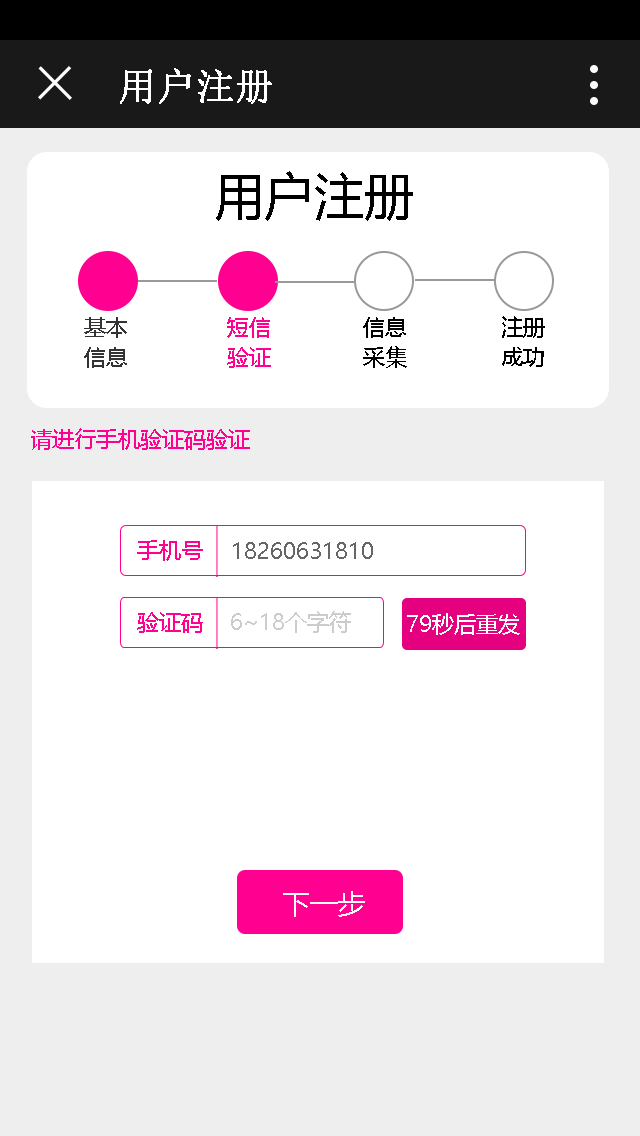
<style>
.page{position:relative;width:640px;height:1136px;background:#ffffff}
.page>*{position:absolute;margin:0}
.t1{font:38px "SimSun";color:#ffffff;font-weight:bold}
.t2{font:50px "MicrosoftYaHei";color:#000000}
.t3{font:22px/30px "MicrosoftYaHei";color:#333333}
.t4{font:22px/30px "MicrosoftYaHei";color:#ff0090}
.t5{font:22px/30px "MicrosoftYaHei";color:#030303}
.t6{font:22px/30px "MicrosoftYaHei";color:#000000}
.t7{font:22px "MicrosoftYaHei";color:#ff0090}
.t8{font:22px "MicrosoftYaHei";color:#666666}
.t9{font:22px "MicrosoftYaHei";color:#cccccc}
.t10{font:22px "MicrosoftYaHei";color:#ffffff}
.t11{font:28px "MicrosoftYaHei";color:#ffffff}
</style>
<div class="page">
<p class="t1" style="left:120px;top:68px;width:152px;height:36px">用户注册</p>
<p class="t2" style="left:216px;top:171px;width:197px;height:50px">用户注册</p>
<p class="t3" style="left:84px;top:317px;width:43px;height:51px">基本<br>信息</p>
<p class="t4" style="left:227px;top:317px;width:44px;height:51px">短信<br>验证</p>
<p class="t5" style="left:363px;top:317px;width:44px;height:51px">信息<br>采集</p>
<p class="t6" style="left:502px;top:316px;width:43px;height:51px">注册<br>成功</p>
<p class="t7" style="left:31px;top:428px;width:219px;height:22px">请进行手机验证码验证</p>
<p class="t7" style="left:137px;top:540px;width:66px;height:21px">手机号</p>
<p class="t8" style="left:233px;top:542px;width:140px;height:17px">18260631810</p>
<p class="t7" style="left:137px;top:612px;width:66px;height:21px">验证码</p>
<p class="t9" style="left:231px;top:611px;width:120px;height:22px">6~18个字符</p>
<p class="t10" style="left:407px;top:613px;width:113px;height:22px">79秒后重发</p>
<p class="t11" style="left:283px;top:891px;width:82px;height:26px">下一步</p>
</div>
